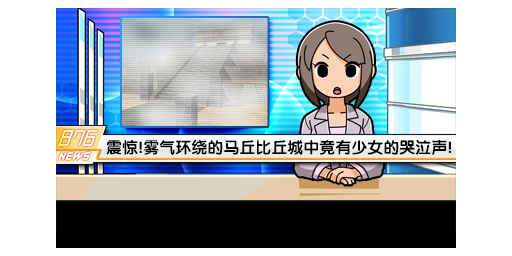
<style>
.page{position:relative;width:512px;height:256px;background:#ffffff}
.page>*{position:absolute;margin:0}
.t1{font:16px "FZY4K--GBK1-0";color:#000000}
</style>
<div class="page">
<p class="t1" style="left:106px;top:139px;width:346px;height:16px">震惊!雾气环绕的马丘比丘城中竟有少女的哭泣声!</p>
</div>
